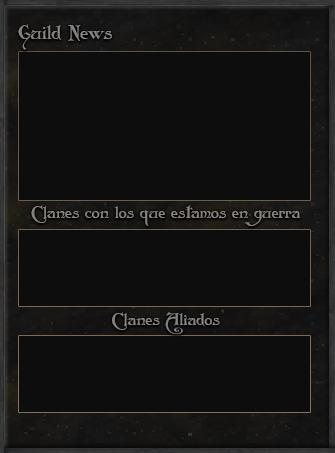
<style>
.page{position:relative;width:335px;height:453px;background:#0d0d0d}
.page>*{position:absolute;margin:0}
.t1{font:19.2px "Folkard";color:#88837e}
.t2{font:16.4px "Folkard";color:#88837e}
</style>
<div class="page">
<p class="t1" style="left:18px;top:24px;width:94px;height:26px">Guild News</p>
<p class="t2" style="left:31px;top:205px;width:270px;height:21px">Clanes con los que estamos en guerra</p>
<p class="t2" style="left:112px;top:312px;width:108px;height:23px">Clanes Aliados</p>
</div>
